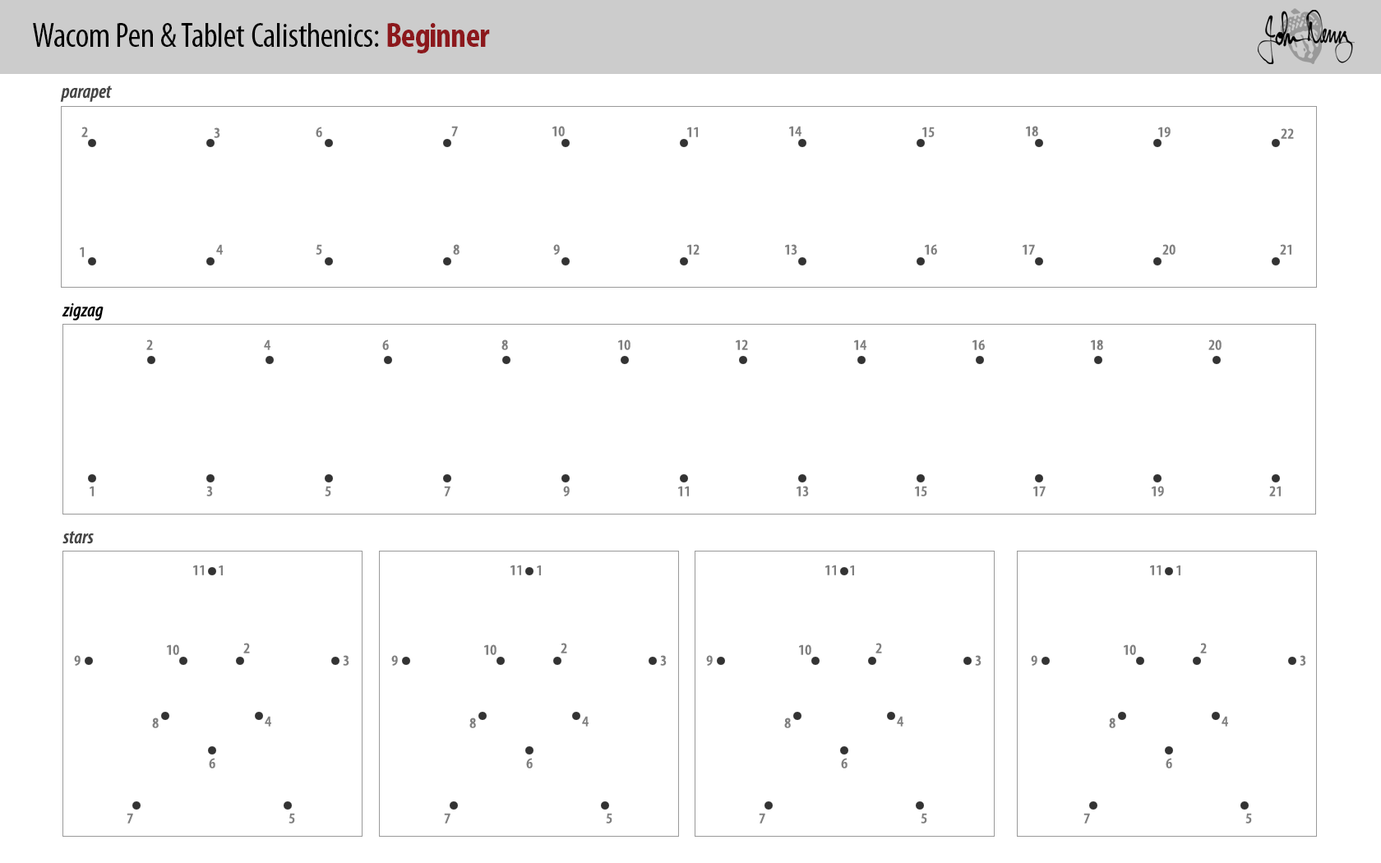
<style>
.page{position:relative;width:1381px;height:863px;background:#ffffff}
.page>*{position:absolute;margin:0}
.t1{font:34.3px "MyriadPro-Cond";color:#000000}
.t2{font:34.3px "MyriadPro-BoldCond";letter-spacing:-0.025em;color:#8c181c}
.t3{font:19.7px "MyriadPro-SemiboldCondIt";color:#464646}
.t4{font:14.8px "MyriadPro-SemiboldCond";letter-spacing:0.005em;color:#808080;scale:1.09 1}
.t5{font:19.7px "MyriadPro-SemiboldCondIt";color:#000000}
</style>
<div class="page">
<p class="t1" style="left:33px;top:23px;width:457px;height:30px">Wacom Pen &amp; Tablet Calisthenics: <span class="t2">Beginner</span></p>
<p class="t3" style="left:60px;top:86px;width:53px;height:16px">parapet</p>
<p class="t4" style="left:451px;top:126px;width:7px;height:10px">7</p>
<p class="t4" style="left:553px;top:126px;width:12px;height:10px">10</p>
<p class="t4" style="left:789px;top:126px;width:13px;height:10px">14</p>
<p class="t4" style="left:1026px;top:126px;width:12px;height:10px">18</p>
<p class="t4" style="left:81px;top:127px;width:7px;height:10px">2</p>
<p class="t4" style="left:214px;top:127px;width:6px;height:11px">3</p>
<p class="t4" style="left:316px;top:127px;width:6px;height:10px">6</p>
<p class="t4" style="left:687px;top:127px;width:11px;height:10px">11</p>
<p class="t4" style="left:922px;top:127px;width:13px;height:10px">15</p>
<p class="t4" style="left:1158px;top:127px;width:13px;height:10px">19</p>
<p class="t4" style="left:1281px;top:128px;width:13px;height:11px">22</p>
<p class="t4" style="left:216px;top:244px;width:7px;height:11px">4</p>
<p class="t4" style="left:316px;top:244px;width:6px;height:11px">5</p>
<p class="t4" style="left:453px;top:244px;width:7px;height:11px">8</p>
<p class="t4" style="left:553px;top:244px;width:7px;height:11px">9</p>
<p class="t4" style="left:687px;top:244px;width:13px;height:11px">12</p>
<p class="t4" style="left:785px;top:244px;width:13px;height:11px">13</p>
<p class="t4" style="left:925px;top:244px;width:12px;height:11px">16</p>
<p class="t4" style="left:1023px;top:244px;width:12px;height:11px">17</p>
<p class="t4" style="left:1163px;top:244px;width:13px;height:11px">20</p>
<p class="t4" style="left:1280px;top:244px;width:12px;height:11px">21</p>
<p class="t4" style="left:80px;top:247px;width:4px;height:10px">1</p>
<p class="t5" style="left:62px;top:303px;width:42px;height:18px">zigzag</p>
<p class="t4" style="left:146px;top:340px;width:7px;height:10px">2</p>
<p class="t4" style="left:264px;top:340px;width:6px;height:10px">4</p>
<p class="t4" style="left:382px;top:340px;width:7px;height:10px">6</p>
<p class="t4" style="left:502px;top:340px;width:6px;height:10px">8</p>
<p class="t4" style="left:618px;top:340px;width:13px;height:10px">10</p>
<p class="t4" style="left:736px;top:340px;width:12px;height:10px">12</p>
<p class="t4" style="left:854px;top:340px;width:13px;height:10px">14</p>
<p class="t4" style="left:973px;top:340px;width:12px;height:10px">16</p>
<p class="t4" style="left:1091px;top:340px;width:12px;height:10px">18</p>
<p class="t4" style="left:1209px;top:340px;width:13px;height:10px">20</p>
<p class="t4" style="left:90px;top:486px;width:4px;height:11px">1</p>
<p class="t4" style="left:206px;top:486px;width:7px;height:11px">3</p>
<p class="t4" style="left:325px;top:486px;width:6px;height:11px">5</p>
<p class="t4" style="left:444px;top:486px;width:7px;height:11px">7</p>
<p class="t4" style="left:563px;top:486px;width:7px;height:11px">9</p>
<p class="t4" style="left:678px;top:486px;width:11px;height:11px">11</p>
<p class="t4" style="left:797px;top:486px;width:12px;height:11px">13</p>
<p class="t4" style="left:915px;top:486px;width:12px;height:11px">15</p>
<p class="t4" style="left:1033px;top:486px;width:13px;height:11px">17</p>
<p class="t4" style="left:1152px;top:486px;width:12px;height:11px">19</p>
<p class="t4" style="left:1269px;top:486px;width:12px;height:11px">21</p>
<p class="t3" style="left:62px;top:531px;width:32px;height:13px">stars</p>
<p class="t4" style="left:193px;top:565px;width:11px;height:11px">11</p>
<p class="t4" style="left:219px;top:566px;width:4px;height:10px">1</p>
<p class="t4" style="left:511px;top:565px;width:10px;height:11px">11</p>
<p class="t4" style="left:537px;top:566px;width:4px;height:10px">1</p>
<p class="t4" style="left:825px;top:565px;width:11px;height:11px">11</p>
<p class="t4" style="left:850px;top:566px;width:4px;height:10px">1</p>
<p class="t4" style="left:1150px;top:565px;width:11px;height:11px">11</p>
<p class="t4" style="left:1177px;top:566px;width:4px;height:10px">1</p>
<p class="t4" style="left:167px;top:645px;width:12px;height:10px">10</p>
<p class="t4" style="left:243px;top:643px;width:7px;height:11px">2</p>
<p class="t4" style="left:484px;top:645px;width:13px;height:10px">10</p>
<p class="t4" style="left:561px;top:643px;width:6px;height:11px">2</p>
<p class="t4" style="left:799px;top:645px;width:12px;height:10px">10</p>
<p class="t4" style="left:876px;top:643px;width:6px;height:11px">2</p>
<p class="t4" style="left:1124px;top:645px;width:12px;height:10px">10</p>
<p class="t4" style="left:1200px;top:643px;width:7px;height:11px">2</p>
<p class="t4" style="left:74px;top:655px;width:7px;height:11px">9</p>
<p class="t4" style="left:343px;top:655px;width:6px;height:11px">3</p>
<p class="t4" style="left:391px;top:655px;width:7px;height:11px">9</p>
<p class="t4" style="left:660px;top:655px;width:7px;height:11px">3</p>
<p class="t4" style="left:706px;top:655px;width:7px;height:11px">9</p>
<p class="t4" style="left:975px;top:655px;width:7px;height:11px">3</p>
<p class="t4" style="left:1031px;top:655px;width:7px;height:11px">9</p>
<p class="t4" style="left:1300px;top:655px;width:6px;height:11px">3</p>
<p class="t4" style="left:152px;top:718px;width:7px;height:10px">8</p>
<p class="t4" style="left:265px;top:716px;width:6px;height:11px">4</p>
<p class="t4" style="left:469px;top:718px;width:7px;height:10px">8</p>
<p class="t4" style="left:582px;top:716px;width:7px;height:11px">4</p>
<p class="t4" style="left:784px;top:718px;width:7px;height:10px">8</p>
<p class="t4" style="left:897px;top:716px;width:7px;height:11px">4</p>
<p class="t4" style="left:1109px;top:718px;width:7px;height:10px">8</p>
<p class="t4" style="left:1222px;top:716px;width:6px;height:11px">4</p>
<p class="t4" style="left:209px;top:758px;width:6px;height:11px">6</p>
<p class="t4" style="left:526px;top:758px;width:7px;height:11px">6</p>
<p class="t4" style="left:841px;top:758px;width:7px;height:11px">6</p>
<p class="t4" style="left:1166px;top:758px;width:6px;height:11px">6</p>
<p class="t4" style="left:127px;top:813px;width:6px;height:11px">7</p>
<p class="t4" style="left:289px;top:813px;width:6px;height:11px">5</p>
<p class="t4" style="left:444px;top:813px;width:7px;height:11px">7</p>
<p class="t4" style="left:606px;top:813px;width:7px;height:11px">5</p>
<p class="t4" style="left:759px;top:813px;width:6px;height:11px">7</p>
<p class="t4" style="left:921px;top:813px;width:6px;height:11px">5</p>
<p class="t4" style="left:1084px;top:813px;width:6px;height:11px">7</p>
<p class="t4" style="left:1246px;top:813px;width:6px;height:11px">5</p>
</div>
